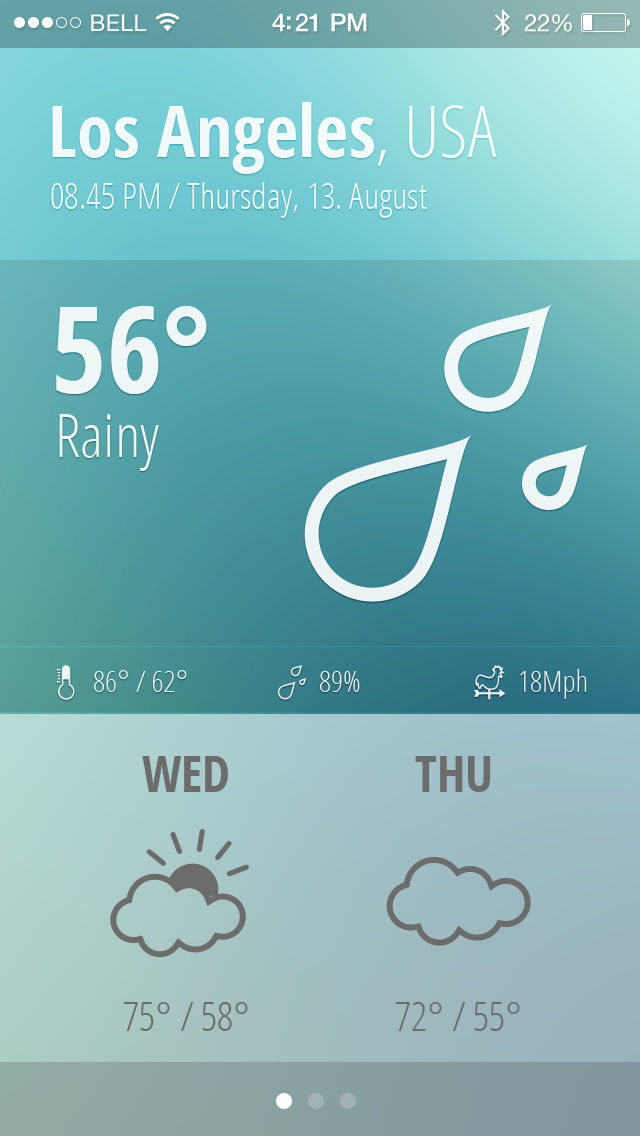
<style>
.page{position:relative;width:640px;height:1136px}
.page>*{position:absolute;margin:0}
.t1{font:23px "HelveticaNeue";letter-spacing:0.02em;color:#ffffff}
.t2{font:25px "HelveticaNeue-Medium";letter-spacing:-0.02em;color:#ffffff}
.t3{font:24px "HelveticaNeue";letter-spacing:-0.02em;color:#ffffff}
.t4{font:72px "OpenSans-CondensedBold";color:#ffffff}
.t5{font:72px "OpenSans-CondensedLight";color:#ffffff}
.t6{font:36px "OpenSans-CondensedLight";color:#ffffff}
.t7{font:120px "OpenSans-CondensedBold";color:#ffffff}
.t8{font:60px "OpenSans-CondensedLight";color:#ffffff}
.t9{font:30px "OpenSans-CondensedLight";color:#ffffff}
.t10{font:50px "OpenSans-CondensedBold";color:#6c6c6c;text-transform:uppercase}
.t11{font:40px "OpenSans-CondensedLight";color:#6c6c6c}
</style>
<div class="page">
<p class="t1" style="left:91px;top:14px;width:56px;height:17px">BELL</p>
<p class="t2" style="left:272px;top:13px;width:95px;height:19px">4:21 PM</p>
<p class="t3" style="left:524px;top:14px;width:48px;height:18px">22%</p>
<p class="t4" style="left:52px;top:102px;width:445px;height:72px">Los Angeles<span class="t5">, USA</span></p>
<p class="t6" style="left:51px;top:182px;width:376px;height:36px">08.45 PM / Thursday, 13. August</p>
<p class="t7" style="left:56px;top:306px;width:151px;height:88px">56°</p>
<p class="t8" style="left:59px;top:414px;width:100px;height:57px">Rainy</p>
<p class="t9" style="left:94px;top:670px;width:93px;height:22px">86° / 62°</p>
<p class="t9" style="left:320px;top:671px;width:40px;height:21px">89%</p>
<p class="t9" style="left:520px;top:669px;width:67px;height:30px">18Mph</p>
<p class="t10" style="left:142px;top:756px;width:86px;height:36px">wed</p>
<p class="t10" style="left:415px;top:756px;width:76px;height:36px">thu</p>
<p class="t11" style="left:124px;top:1002px;width:124px;height:29px">75° / 58°</p>
<p class="t11" style="left:396px;top:1002px;width:124px;height:29px">72° / 55°</p>
</div>
